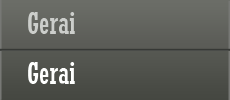
<style>
.page{position:relative;width:230px;height:100px}
.page>*{position:absolute;margin:0}
.t1{font:30px "Rockwell-Condensed";color:#cccecb}
.t2{font:30px "Rockwell-Condensed";color:#fefffe}
</style>
<div class="page">
<p class="t1" style="left:28px;top:12px;width:47px;height:22px">Gerai</p>
<p class="t2" style="left:28px;top:62px;width:47px;height:22px">Gerai</p>
</div>
